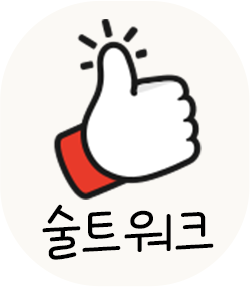
<style>
.page{position:relative;width:250px;height:287px;background:#fbf9f5}
.page>*{position:absolute;margin:0}
.t1{font:76.4px "GangwonEduSaeeumMedium";color:#000000}
</style>
<div class="page">
<p class="t1" style="left:42px;top:204px;width:172px;height:56px">술트워크</p>
</div>
